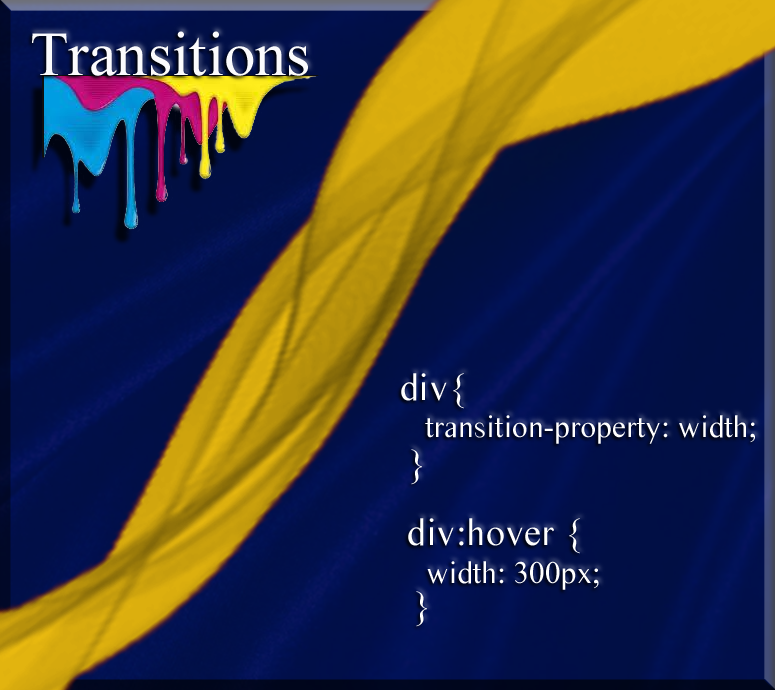
<style>
.page{position:relative;width:775px;height:690px}
.page>*{position:absolute;margin:0}
.t1{font:62.5px "TimesNewRomanPSMT";color:#fbfbfd}
.t2{font:38.5px "TimesSansSerif";color:#ffffff}
.t3{font:31.5px "TimesSansSerif";color:#ffffff}
</style>
<div class="page">
<p class="t1" style="left:32px;top:31px;width:276px;height:45px">Transitions</p>
<p class="t2" style="left:401px;top:373px;width:63px;height:36px">div{</p>
<p class="t3" style="left:425px;top:415px;width:330px;height:29px">transition-property: width;</p>
<p class="t2" style="left:411px;top:449px;width:11px;height:36px">}</p>
<p class="t2" style="left:408px;top:518px;width:172px;height:36px">div:hover {</p>
<p class="t3" style="left:427px;top:561px;width:172px;height:29px">width: 300px;</p>
<p class="t2" style="left:416px;top:591px;width:11px;height:36px">}</p>
</div>
